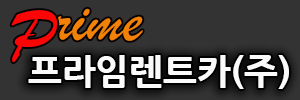
<style>
.page{position:relative;width:300px;height:100px;background:#333333}
.page>*{position:absolute;margin:0}
.t1{font:72px "BrushScriptMT";color:#fb0606}
.t2{font:65px "BrushScriptMT";color:#f28108}
.t3{font:36px "NanumGothicExtraBold";color:#fbfafa}
</style>
<div class="page">
<p class="t1" style="left:11px;top:10px;width:47px;height:52px">P</p>
<p class="t2" style="left:53px;top:8px;width:90px;height:33px">rime</p>
<p class="t3" style="left:28px;top:55px;width:261px;height:34px">프라임렌트카(주)</p>
</div>
